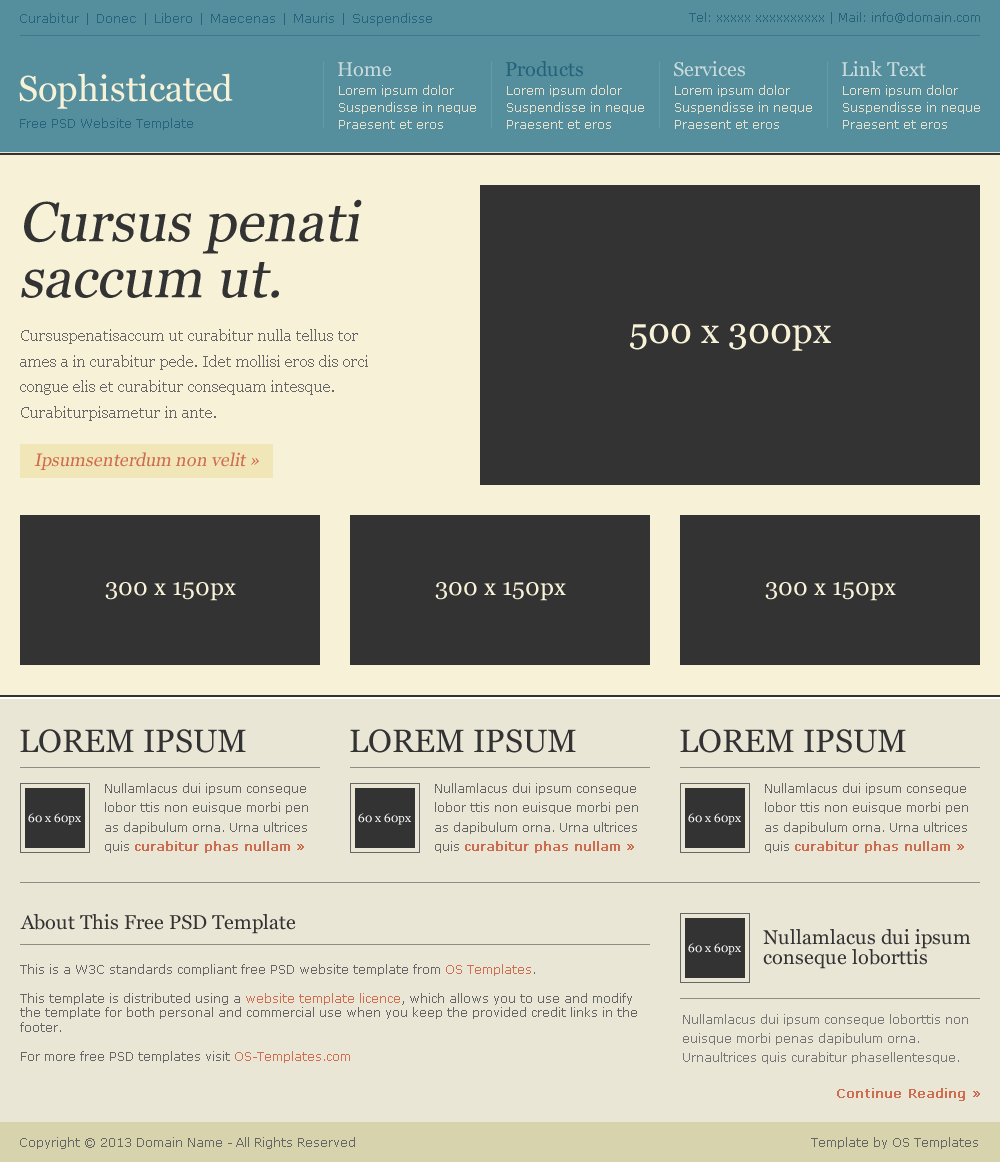
<style>
.page{position:relative;width:1000px;height:1162px;background:#eae6d6}
.page>*{position:absolute;margin:0}
.t1{font:13px "Verdana";color:#26647d}
.t2{font:12px "Verdana";color:#26647d}
.t3{font:20px "Georgia";color:#cadbdd}
.t4{font:20px "Georgia";color:#24627b}
.t5{font:36px "Georgia";color:#f7f1d7}
.t6{font:12px/16.8px "Verdana";color:#e5e0cc}
.t7{font:56px/56px "Georgia";color:#333333;font-style:italic}
.t8{font:16px/25.6px "Georgia";color:#666666}
.t9{font:18px "Georgia";color:#cf6d50;font-style:italic}
.t10{font:24px "Georgia";color:#f7f1d7}
.t11{font:32px "Georgia";color:#333333}
.t12{font:12px/19.2px "Verdana";color:#666666}
.t13{font:12px/19.2px "Verdana";color:#ce6c50;font-weight:bold}
.t14{font:12px "Georgia";color:#ffffff}
.t15{font:20px "Georgia";color:#333333}
.t16{font:20px/20px "Georgia";color:#333333}
.t17{font:12px/14.4px "Verdana";color:#666666}
.t18{font:12px/14.4px "Verdana";color:#cf6d50}
.t19{font:12px/19.2px "Verdana";color:#777777}
.t20{font:13px "Verdana";color:#cf6d50;font-weight:bold}
.t21{font:12px "Verdana";color:#666666}
</style>
<div class="page">
<p class="t1" style="left:20px;top:13px;width:412px;height:13px">Curabitur | Donec | Libero | Maecenas | Mauris | Suspendisse</p>
<p class="t2" style="left:689px;top:12px;width:291px;height:12px">Tel: xxxxx xxxxxxxxxx | Mail: info@domain.com</p>
<p class="t3" style="left:338px;top:62px;width:54px;height:15px">Home</p>
<p class="t4" style="left:505px;top:61px;width:78px;height:16px">Products</p>
<p class="t3" style="left:674px;top:61px;width:71px;height:16px">Services</p>
<p class="t3" style="left:842px;top:61px;width:84px;height:16px">Link Text</p>
<p class="t5" style="left:19px;top:73px;width:214px;height:36px">Sophisticated</p>
<p class="t6" style="left:339px;top:85px;width:137px;height:44px">Lorem ipsum dolor<br>Suspendisse in neque<br>Praesent et eros</p>
<p class="t6" style="left:507px;top:85px;width:137px;height:44px">Lorem ipsum dolor<br>Suspendisse in neque<br>Praesent et eros</p>
<p class="t6" style="left:675px;top:85px;width:137px;height:44px">Lorem ipsum dolor<br>Suspendisse in neque<br>Praesent et eros</p>
<p class="t6" style="left:843px;top:85px;width:137px;height:44px">Lorem ipsum dolor<br>Suspendisse in neque<br>Praesent et eros</p>
<p class="t2" style="left:20px;top:118px;width:173px;height:12px">Free PSD Website Template</p>
<p class="t7" style="left:21px;top:199px;width:341px;height:99px">Cursus penati saccum ut.</p>
<p class="t8" style="left:20px;top:329px;width:348px;height:92px">Cursuspenatisaccum ut curabitur nulla tellus tor ames a in curabitur pede. Idet mollisi eros dis orci congue elis et curabitur consequam intesque. Curabiturpisametur in ante.</p>
<p class="t5" style="left:630px;top:323px;width:201px;height:28px">500 x 300px</p>
<p class="t9" style="left:34px;top:452px;width:225px;height:18px">Ipsumsenterdum non velit »</p>
<p class="t10" style="left:105px;top:582px;width:131px;height:19px">300 x 150px</p>
<p class="t10" style="left:435px;top:582px;width:131px;height:19px">300 x 150px</p>
<p class="t10" style="left:765px;top:582px;width:131px;height:19px">300 x 150px</p>
<p class="t11" style="left:20px;top:729px;width:226px;height:24px">LOREM IPSUM</p>
<p class="t11" style="left:350px;top:729px;width:226px;height:24px">LOREM IPSUM</p>
<p class="t11" style="left:680px;top:729px;width:226px;height:24px">LOREM IPSUM</p>
<p class="t12" style="left:105px;top:783px;width:203px;height:70px">Nullamlacus dui ipsum conseque lobor ttis non euisque morbi pen as dapibulum orna. Urna ultrices quis <span class="t13">curabitur phas nullam »</span></p>
<p class="t12" style="left:435px;top:783px;width:203px;height:70px">Nullamlacus dui ipsum conseque lobor ttis non euisque morbi pen as dapibulum orna. Urna ultrices quis <span class="t13">curabitur phas nullam »</span></p>
<p class="t12" style="left:765px;top:783px;width:203px;height:70px">Nullamlacus dui ipsum conseque lobor ttis non euisque morbi pen as dapibulum orna. Urna ultrices quis <span class="t13">curabitur phas nullam »</span></p>
<p class="t14" style="left:28px;top:813px;width:53px;height:12px">60 x 60px</p>
<p class="t14" style="left:358px;top:813px;width:53px;height:12px">60 x 60px</p>
<p class="t14" style="left:688px;top:813px;width:53px;height:12px">60 x 60px</p>
<p class="t15" style="left:20px;top:914px;width:276px;height:20px">About This Free PSD Template</p>
<p class="t16" style="left:763px;top:929px;width:208px;height:40px">Nullamlacus dui ipsum <br>conseque loborttis</p>
<p class="t14" style="left:688px;top:943px;width:53px;height:12px">60 x 60px</p>
<p class="t17" style="left:20px;top:964px;width:617px;height:99px">This is a W3C standards compliant free PSD website template from <span class="t18">OS Templates</span>.<br><br>This template is distributed using a <span class="t18">website template licence</span>, which allows you to use and modify the template for both personal and commercial use when you keep the provided credit links in the footer.<br><br>For more free PSD templates visit <span class="t18">OS-Templates.com</span><br><br>Lacusenim inte trices lorem anterdum nam sente vivamus quis fauctor mauris.</p>
<p class="t19" style="left:683px;top:1014px;width:285px;height:50px">Nullamlacus dui ipsum conseque loborttis non <br>euisque morbi penas dapibulum orna. <br>Urnaultrices quis curabitur phasellentesque.</p>
<p class="t20" style="left:837px;top:1088px;width:143px;height:13px">Continue Reading »</p>
<p class="t21" style="left:20px;top:1137px;width:335px;height:12px">Copyright © 2013 Domain Name - All Rights Reserved</p>
<p class="t21" style="left:811px;top:1137px;width:167px;height:12px">Template by OS Templates</p>
</div>
